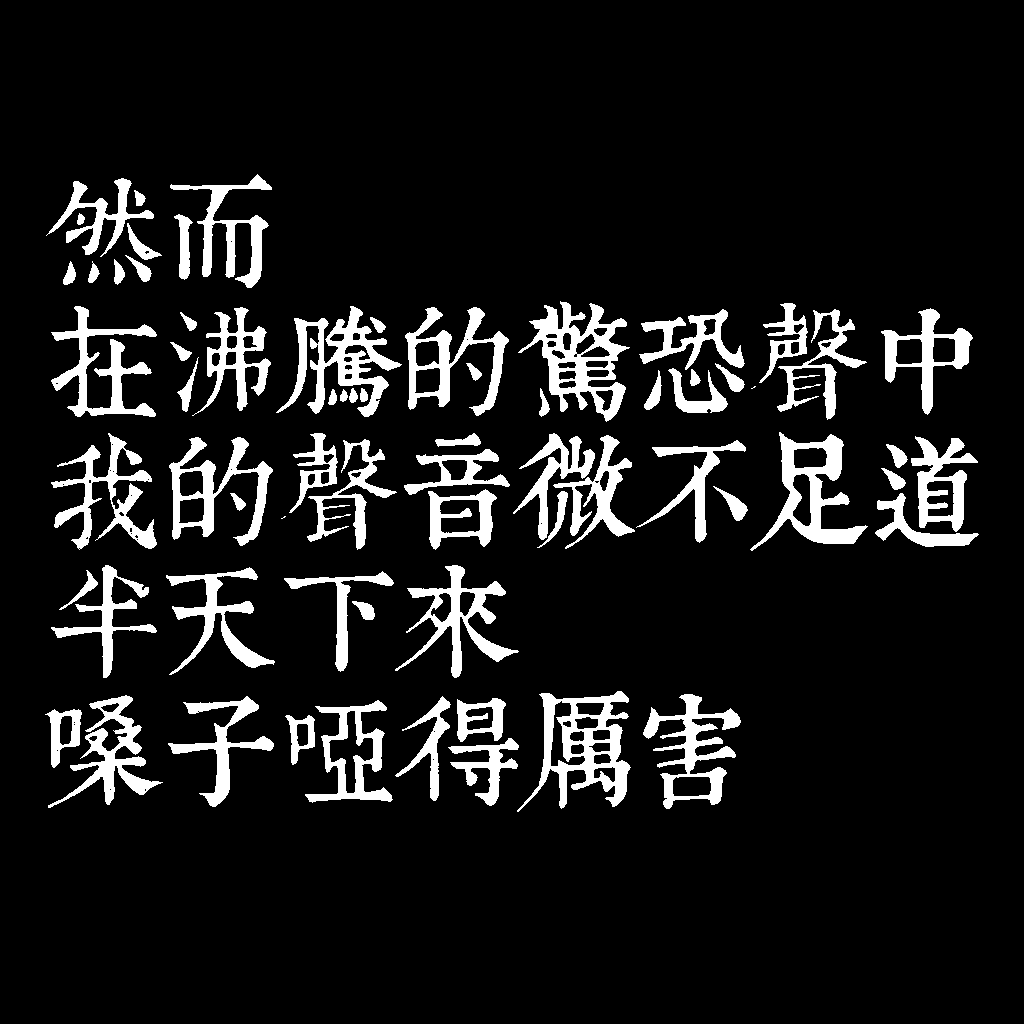
<style>
.page{position:relative;width:1024px;height:1024px;background:#000000}
.page>*{position:absolute;margin:0}
.t1{font:120px/130px "TpldKhangXiDictTrial";letter-spacing:-0.02em;color:#ffffff}
</style>
<div class="page">
<p class="t1" style="left:45px;top:174px;width:934px;height:638px">然而<br>在沸騰的驚恐聲中<br>我的聲音微不足道<br>半天下來<br>嗓子啞得厲害</p>
</div>
